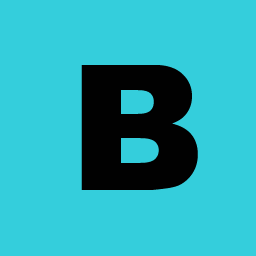
<style>
.page{position:relative;width:256px;height:256px;background:#34cedc}
.page>*{position:absolute;margin:0}
.t1{font:174.7px "Arial-Black";color:#010101}
</style>
<div class="page">
<p class="t1" style="left:81px;top:65px;width:117px;height:125px">B</p>
</div>
